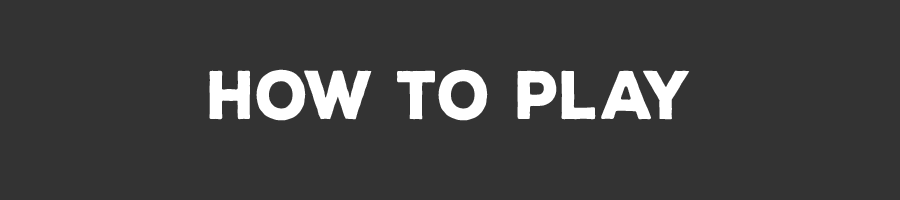
<style>
.page{position:relative;width:900px;height:200px;background:#333333}
.page>*{position:absolute;margin:0}
.t1{font:66.7px "NexaRustSans-Black";color:#ffffff;scale:0.91 1}
</style>
<div class="page">
<p class="t1" style="left:209px;top:69px;width:481px;height:52px">how to Play</p>
</div>
